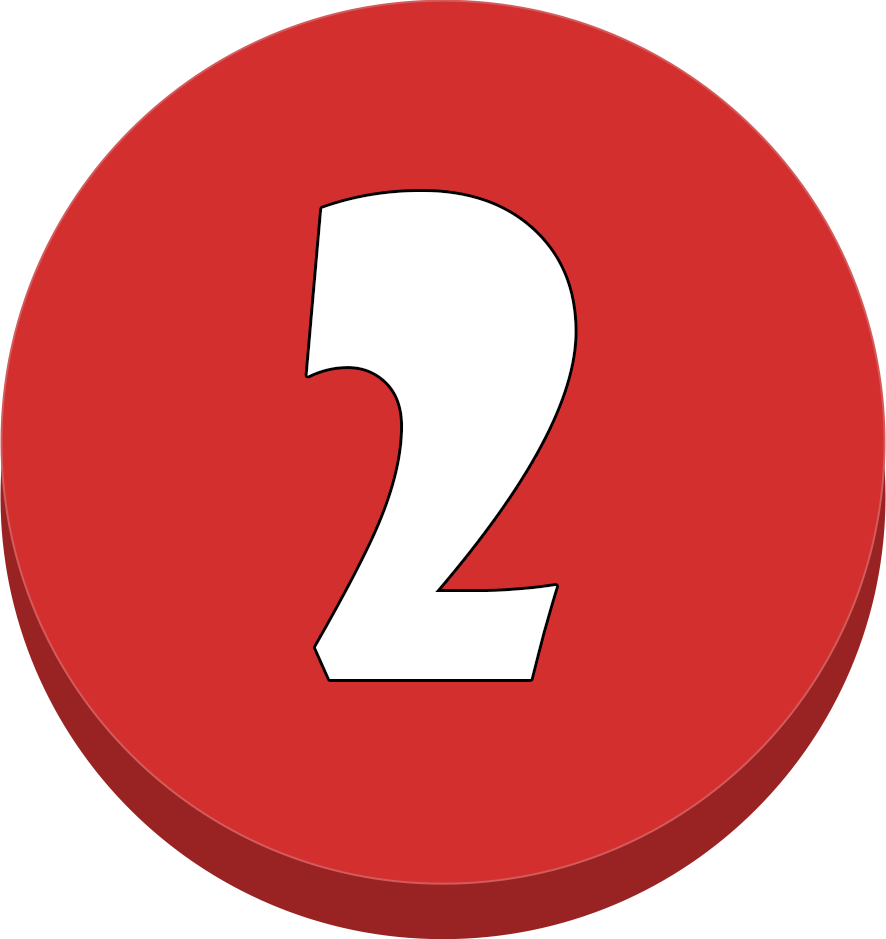
<style>
.page{position:relative;width:886px;height:939px;background:#d32f2f}
.page>*{position:absolute;margin:0}
.t1{font:637.2px "ShowcardGothic-Reg";color:#ffffff}
</style>
<div class="page">
<p class="t1" style="left:307px;top:192px;width:268px;height:487px">2</p>
</div>
